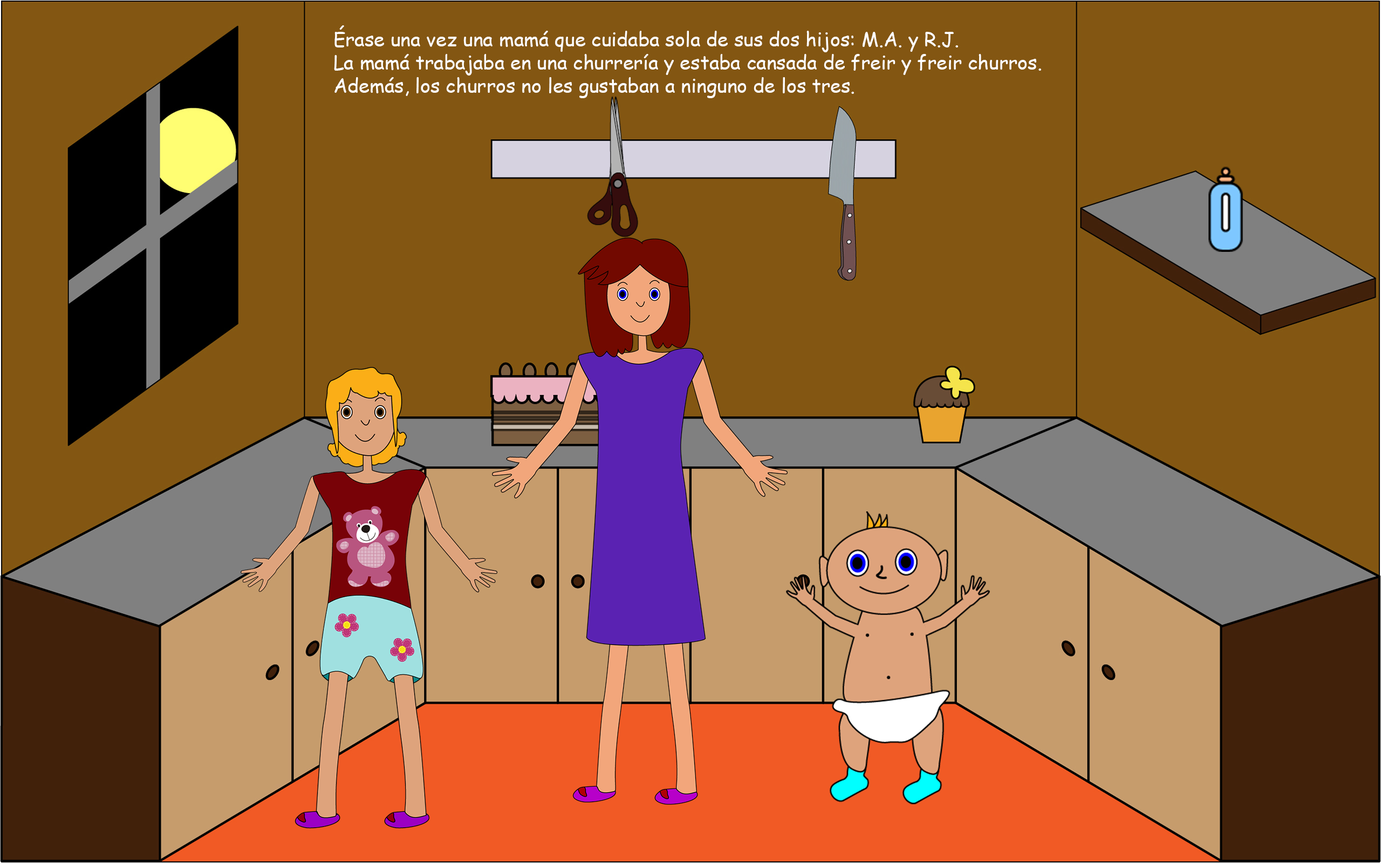
<style>
.page{position:relative;width:1381px;height:863px;background:#835612}
.page>*{position:absolute;margin:0}
.t1{font:19.4px "ComicSansMS";color:#ffffff}
</style>
<div class="page">
<p class="t1" style="left:334px;top:25px;width:707px;height:73px">Érase una vez una mamá que cuidaba sola de sus dos hijos: M.A. y R.J. <br>La mamá trabajaba en una churrería y estaba cansada de freir y freir churros. <br>Además, los churros no les gustaban a ninguno de los tres.</p>
</div>
